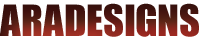
<style>
.page{position:relative;width:200px;height:49px;background:#ffffff}
.page>*{position:absolute;margin:0}
.t1{font:40px "Impact"}
</style>
<div class="page">
<p class="t1" style="left:0px;top:3px;width:199px;height:34px">ARADESIGNS</p>
</div>
